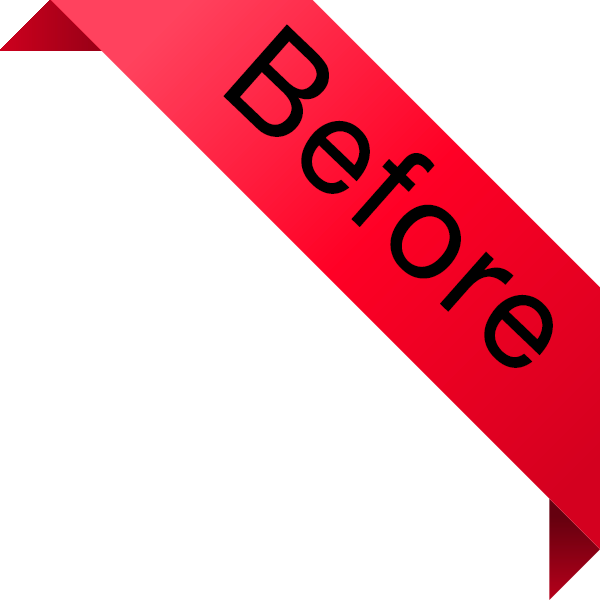
<style>
.page{position:relative;width:600px;height:600px;background:#ffffff}
.page>*{position:absolute;margin:0}
.t1{font:134.4px "HelveticaNeue";letter-spacing:0.041em;color:#000000}
</style>
<div class="page">
<p class="t1" style="left:223px;top:24px;width:330px;height:344px;rotate:44deg">Before</p>
</div>
